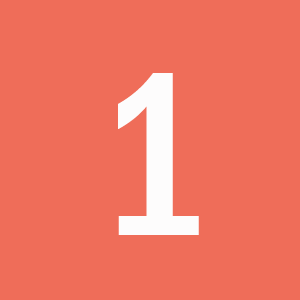
<style>
.page{position:relative;width:300px;height:300px;background:#ef6d59}
.page>*{position:absolute;margin:0}
.t1{font:240px "FranklinGothic-MediumCond";color:#fdfcfc}
</style>
<div class="page">
<p class="t1" style="left:118px;top:73px;width:81px;height:162px">1</p>
</div>
